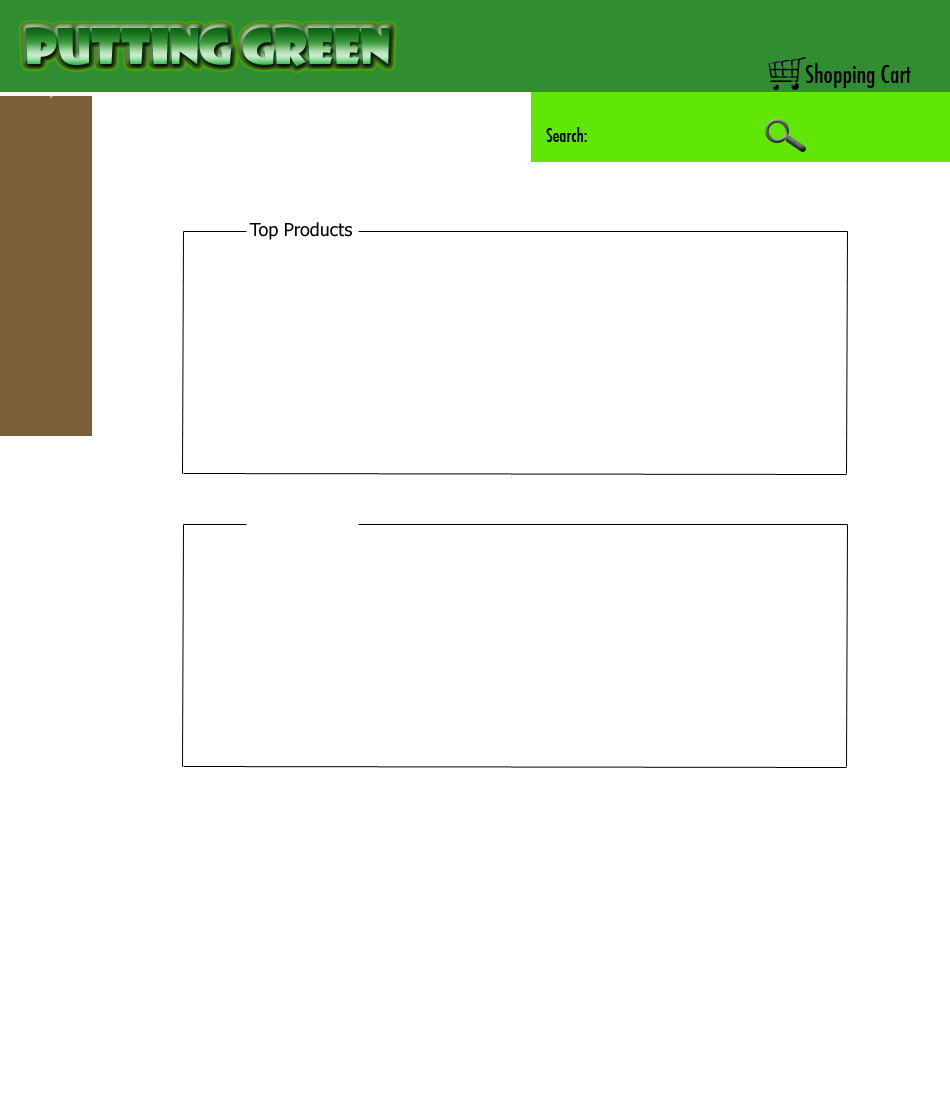
<style>
.page{position:relative;width:950px;height:1100px;background:#ffffff}
.page>*{position:absolute;margin:0}
.t1{font:48px "ShowcardGothic-Reg"}
.t2{font:18px "Futura-CondensedMedium";color:#020202}
.t3{font:18px "Tahoma";color:#040404}
</style>
<div class="page">
<p class="t1" style="left:25px;top:27px;width:365px;height:40px">PUTTING GREEN</p>
<p class="t2" style="left:546px;top:127px;width:41px;height:15px">Search:</p>
<p class="t3" style="left:249px;top:222px;width:103px;height:18px">Top Products</p>
</div>
